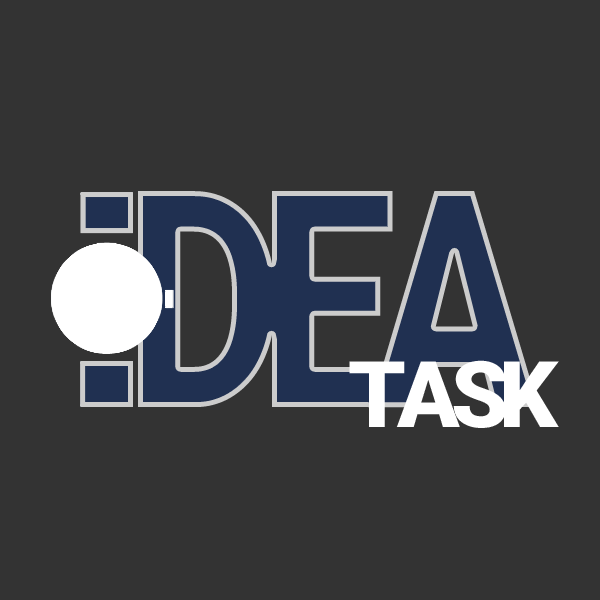
<style>
.page{position:relative;width:600px;height:600px;background:#333333}
.page>*{position:absolute;margin:0}
.t1{font:303.5px "Roboto-Black";letter-spacing:-0.1em;color:#203051;scale:0.81 1}
.t2{font:92px "Roboto-Black";letter-spacing:-0.1em;color:#ffffff}
</style>
<div class="page">
<p class="t1" style="left:138px;top:191px;width:401px;height:217px">DEA</p>
<p class="t2" style="left:349px;top:360px;width:210px;height:68px">TASK</p>
</div>
